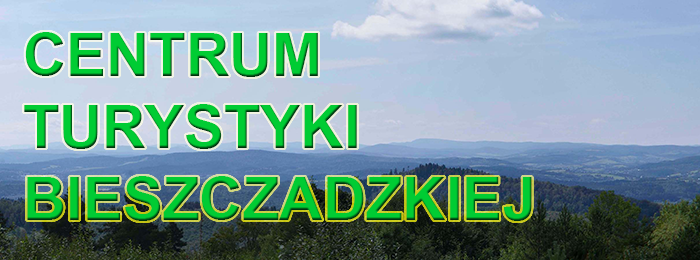
<style>
.page{position:relative;width:700px;height:260px}
.page>*{position:absolute;margin:0}
.t1{font:60px "Arial-BoldMT";color:#00cc33}
</style>
<div class="page">
<p class="t1" style="left:24px;top:32px;width:508px;height:189px;text-align:justify">CENTRUM<br>TURYSTYKI<br>BIESZCZADZKIEJ</p>
</div>
